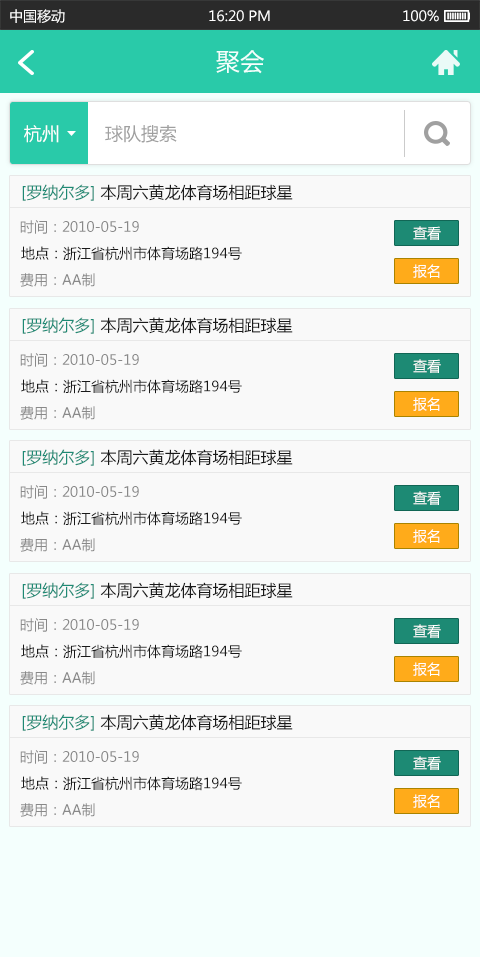
<style>
.page{position:relative;width:480px;height:957px;background:#f9f9f9}
.page>*{position:absolute;margin:0}
.t1{font:14px "MicrosoftYaHei";color:#ffffff}
.t2{font:24px "MicrosoftYaHei";color:#f4fffd}
.t3{font:18px "MicrosoftYaHei";color:#ffffff}
.t4{font:18px "MicrosoftYaHei";color:#a0a0a0}
.t5{font:16px "MicrosoftYaHei";color:#191919}
.t6{font:16px "MicrosoftYaHei";color:#1d8a74}
.t7{font:14px "MicrosoftYaHei";color:#898989}
.t8{font:14px "MicrosoftYaHei";color:#191919}
</style>
<div class="page">
<p class="t1" style="left:10px;top:9px;width:55px;height:14px">中国移动</p>
<p class="t1" style="left:209px;top:10px;width:61px;height:12px">16:20 PM</p>
<p class="t1" style="left:403px;top:10px;width:36px;height:12px">100%</p>
<p class="t2" style="left:216px;top:50px;width:48px;height:24px">聚会</p>
<p class="t3" style="left:24px;top:125px;width:35px;height:18px">杭州</p>
<p class="t4" style="left:105px;top:125px;width:72px;height:18px">球队搜索</p>
<p class="t5" style="left:22px;top:184px;width:271px;height:17px"><span class="t6">[罗纳尔多] </span>本周六黄龙体育场相距球星</p>
<p class="t7" style="left:20px;top:220px;width:119px;height:14px">时间：2010-05-19</p>
<p class="t1" style="left:413px;top:226px;width:28px;height:14px">查看</p>
<p class="t8" style="left:21px;top:246px;width:221px;height:15px">地点：浙江省杭州市体育场路194号</p>
<p class="t1" style="left:413px;top:264px;width:27px;height:14px">报名</p>
<p class="t7" style="left:20px;top:273px;width:75px;height:14px">费用：AA制</p>
<p class="t5" style="left:22px;top:317px;width:271px;height:17px"><span class="t6">[罗纳尔多] </span>本周六黄龙体育场相距球星</p>
<p class="t7" style="left:20px;top:353px;width:119px;height:14px">时间：2010-05-19</p>
<p class="t1" style="left:413px;top:359px;width:28px;height:14px">查看</p>
<p class="t8" style="left:21px;top:379px;width:221px;height:15px">地点：浙江省杭州市体育场路194号</p>
<p class="t1" style="left:413px;top:397px;width:27px;height:14px">报名</p>
<p class="t7" style="left:20px;top:406px;width:75px;height:14px">费用：AA制</p>
<p class="t5" style="left:22px;top:449px;width:271px;height:17px"><span class="t6">[罗纳尔多] </span>本周六黄龙体育场相距球星</p>
<p class="t7" style="left:20px;top:485px;width:119px;height:14px">时间：2010-05-19</p>
<p class="t1" style="left:413px;top:491px;width:28px;height:14px">查看</p>
<p class="t8" style="left:21px;top:511px;width:221px;height:15px">地点：浙江省杭州市体育场路194号</p>
<p class="t1" style="left:413px;top:529px;width:27px;height:14px">报名</p>
<p class="t7" style="left:20px;top:538px;width:75px;height:14px">费用：AA制</p>
<p class="t5" style="left:22px;top:582px;width:271px;height:17px"><span class="t6">[罗纳尔多] </span>本周六黄龙体育场相距球星</p>
<p class="t7" style="left:20px;top:618px;width:119px;height:14px">时间：2010-05-19</p>
<p class="t1" style="left:413px;top:624px;width:28px;height:14px">查看</p>
<p class="t8" style="left:21px;top:644px;width:221px;height:15px">地点：浙江省杭州市体育场路194号</p>
<p class="t1" style="left:413px;top:662px;width:27px;height:14px">报名</p>
<p class="t7" style="left:20px;top:671px;width:75px;height:14px">费用：AA制</p>
<p class="t5" style="left:22px;top:714px;width:271px;height:17px"><span class="t6">[罗纳尔多] </span>本周六黄龙体育场相距球星</p>
<p class="t7" style="left:20px;top:750px;width:119px;height:14px">时间：2010-05-19</p>
<p class="t1" style="left:413px;top:756px;width:28px;height:14px">查看</p>
<p class="t8" style="left:21px;top:776px;width:221px;height:15px">地点：浙江省杭州市体育场路194号</p>
<p class="t1" style="left:413px;top:794px;width:27px;height:14px">报名</p>
<p class="t7" style="left:20px;top:803px;width:75px;height:14px">费用：AA制</p>
</div>
